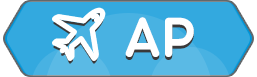
<style>
.page{position:relative;width:257px;height:77px;background:#33a9df}
.page>*{position:absolute;margin:0}
.t1{font:60px "Torus-SemiBold";color:#ffffff}
</style>
<div class="page">
<p class="t1" style="left:125px;top:17px;width:69px;height:40px">AP</p>
<p class="t1" style="left:125px;top:20px;width:69px;height:40px">AP</p>
</div>
